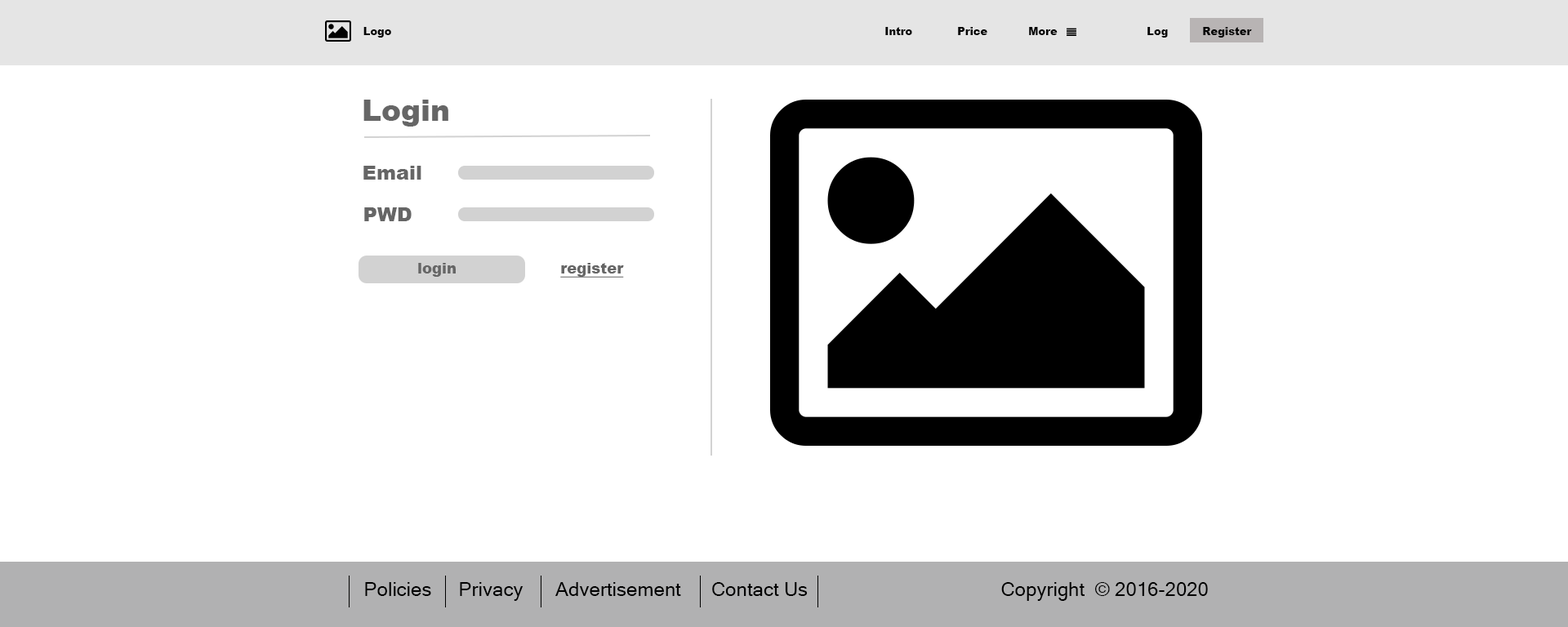
<style>
.page{position:relative;width:1568px;height:627px;background:#ffffff}
.page>*{position:absolute;margin:0}
.t1{font:10.6px "Arial-Black";color:#050505}
.t2{font:29.4px "Arial-Black";color:#666666}
.t3{font:19.6px "Arial-Black";color:#666666}
.t4{font:14.7px "Arial-Black";color:#666666}
.t5{font:14.7px "Arial-Black";color:#666666;text-decoration:underline}
.t6{font:19.6px "MicrosoftSansSerif";color:#000000}
</style>
<div class="page">
<p class="t1" style="left:363px;top:27px;width:28px;height:11px">Logo</p>
<p class="t1" style="left:885px;top:27px;width:27px;height:8px">Intro</p>
<p class="t1" style="left:958px;top:27px;width:29px;height:8px">Price</p>
<p class="t1" style="left:1029px;top:27px;width:29px;height:8px">More</p>
<p class="t1" style="left:1147px;top:27px;width:21px;height:11px">Log</p>
<p class="t1" style="left:1203px;top:27px;width:49px;height:11px">Register</p>
<p class="t2" style="left:363px;top:100px;width:85px;height:27px">Login</p>
<p class="t3" style="left:363px;top:166px;width:58px;height:14px">Email</p>
<p class="t3" style="left:364px;top:207px;width:48px;height:14px">PWD</p>
<p class="t4" style="left:418px;top:263px;width:38px;height:14px">login</p>
<p class="t5" style="left:560px;top:263px;width:64px;height:15px">register</p>
<p class="t6" style="left:365px;top:582px;width:66px;height:14px">Policies</p>
<p class="t6" style="left:460px;top:582px;width:63px;height:19px">Privacy</p>
<p class="t6" style="left:555px;top:582px;width:126px;height:14px">Advertisement</p>
<p class="t6" style="left:712px;top:582px;width:96px;height:14px">Contact Us</p>
<p class="t6" style="left:1001px;top:582px;width:207px;height:19px">Copyright  © 2016-2020</p>
</div>
